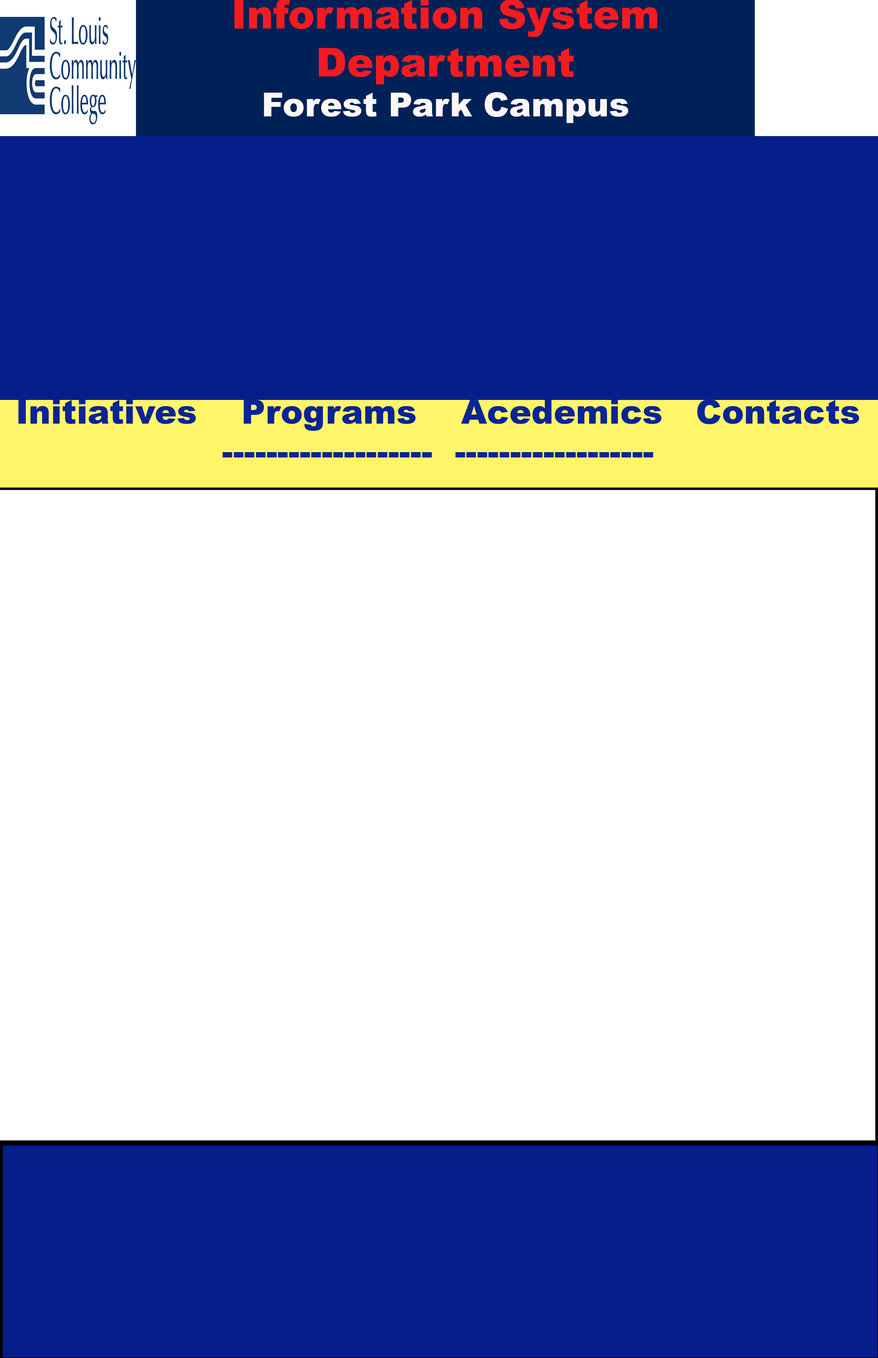
<style>
.page{position:relative;width:878px;height:1358px;background:#ffffff}
.page>*{position:absolute;margin:0}
.t1{font:39.9px "Arial-Black";color:#f41b20}
.t2{font:33.3px "Arial-Black";color:#fcf7f7}
.t3{font:33.3px "Arial-Black";color:#0a2495}
</style>
<div class="page">
<p class="t1" style="left:235px;top:0px;width:423px;height:123px;text-align:center">Information System Department<br><span class="t2">Forest Park Campus</span></p>
<p class="t3" style="left:18px;top:399px;width:841px;height:58px;text-align:center">Initiatives    Programs    Acedemics   Contacts<br>-------------------  ------------------  ............-------------------------------------------------------</p>
</div>
